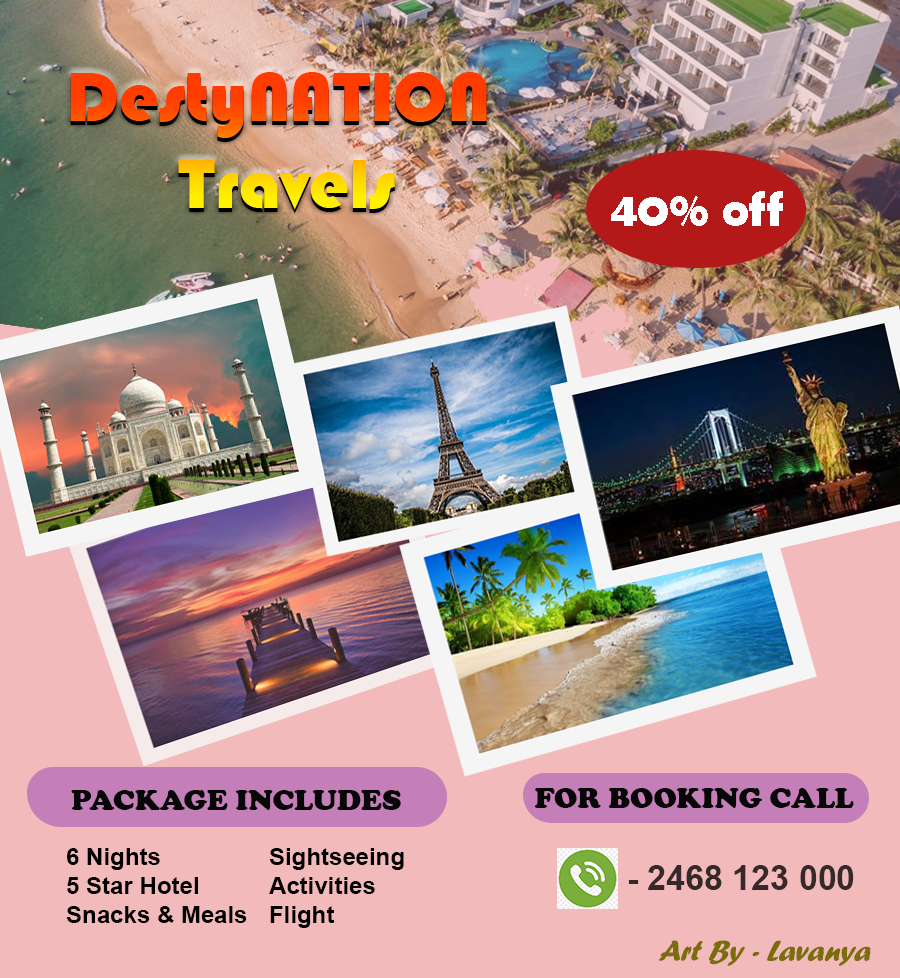
<style>
.page{position:relative;width:900px;height:978px;background:#f3babb}
.page>*{position:absolute;margin:0}
.t1{font:72px "Bauhaus93"}
.t2{font:50px "BerlinSansFBDemi-Bold";color:#ffffff}
.t3{font:30px "CooperBlack";color:#070707}
.t4{font:24px "Arial-BoldMT";color:#000000}
.t5{font:36px "Arial-BoldMT";color:#000000}
.t6{font:34px "Arial-BoldMT";color:#36292a}
.t7{font:30px "ForteMT";color:#796d0c;font-style:italic}
.t8{font:34px "ForteMT";color:#796d0c;font-style:italic}
</style>
<div class="page">
<p class="t1" style="left:70px;top:72px;width:417px;height:138px;text-align:center">DestyNATION <br>Travels</p>
<p class="t2" style="left:611px;top:191px;width:172px;height:35px">40% off</p>
<p class="t3" style="left:71px;top:790px;width:330px;height:20px">PACKAGE INCLUDES</p>
<p class="t3" style="left:534px;top:788px;width:320px;height:20px">FOR BOOKING CALL</p>
<p class="t4" style="left:66px;top:848px;width:181px;height:75px;text-align:center"><span class="t5"><br></span>6 Nights  <br>5 Star Hotel<br>Snacks &amp; Meals</p>
<p class="t4" style="left:269px;top:848px;width:135px;height:80px">Sightseeing<br>Activities<br>Flight</p>
<p class="t6" style="left:628px;top:865px;width:226px;height:25px">- 2468 123 000</p>
<p class="t7" style="left:658px;top:940px;width:213px;height:26px"><span class="t8">                                      </span>Art By - Lavanya</p>
</div>
